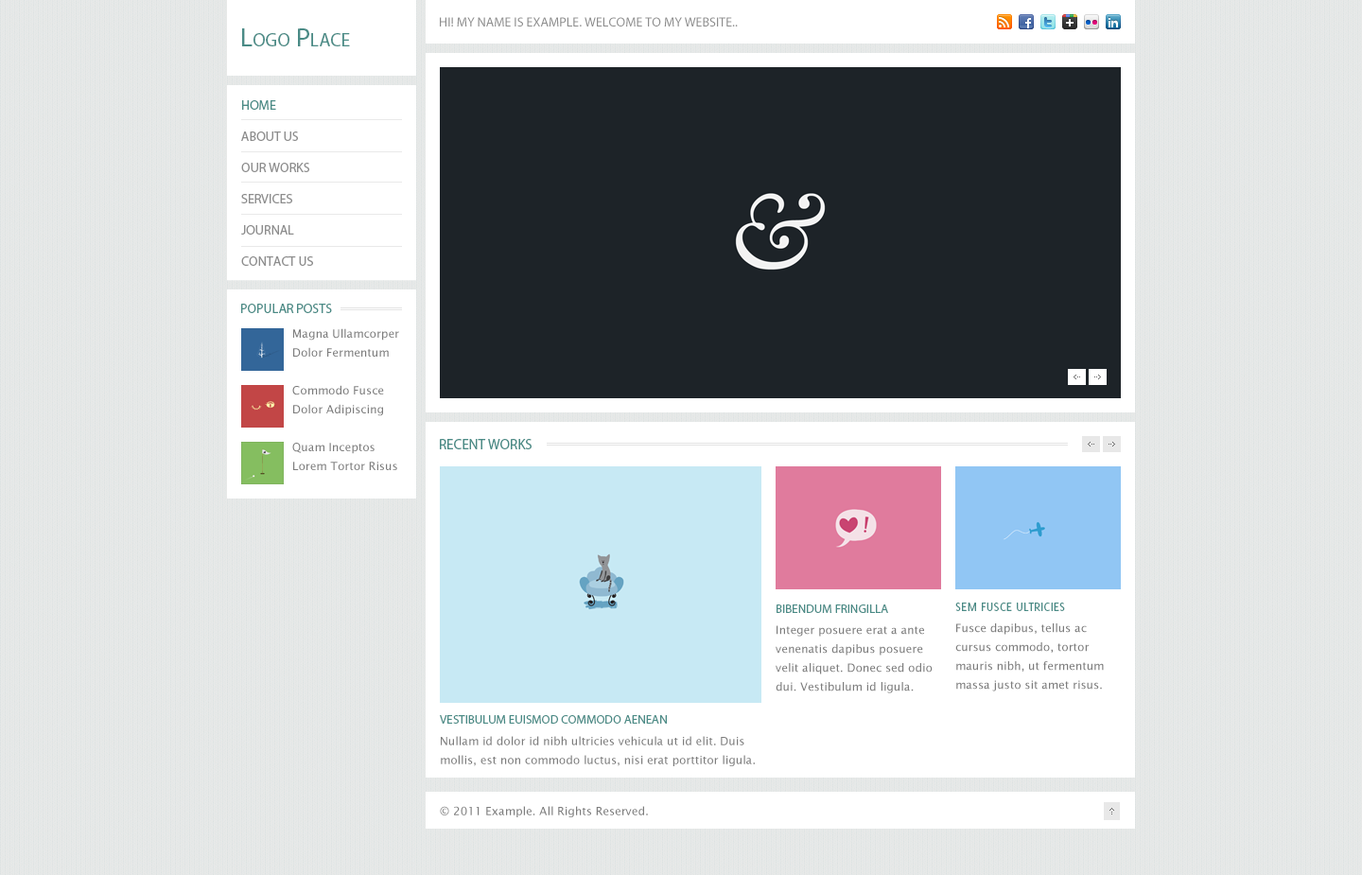
<style>
.page{position:relative;width:1362px;height:875px;background:#ffffff}
.page>*{position:absolute;margin:0}
.t1{font:13.2px "MyriadPro-Regular";color:#8d8d8d;text-transform:uppercase}
.t2{font:26.5px "MyriadPro-Regular";color:#4a8b86;font-variant:small-caps}
.t3{font:13.2px/31.2px "MyriadPro-Regular";color:#8d8d8d;text-transform:uppercase}
.t4{font:13.2px/31.2px "MyriadPro-Regular";color:#4a8b86;text-transform:uppercase}
.t5{font:13.2px "MyriadPro-Regular";color:#4a8b86;text-transform:uppercase}
.t6{font:11.4px/18.9px "LucidaSansUnicode";color:#7d7d7d}
.t7{font:14.2px "MyriadPro-Regular";color:#4a8b86;text-transform:uppercase}
.t8{font:12.3px "MyriadPro-Regular";color:#4a8b86;text-transform:uppercase}
.t9{font:13.2px "Delicious-Roman";color:#4a8b86;text-transform:uppercase}
.t10{font:11.4px "LucidaSansUnicode";color:#7d7d7d}
</style>
<div class="page">
<p class="t1" style="left:440px;top:17px;width:298px;height:9px">Hi! My Name Is Example. Welcome to my Website..</p>
<p class="t2" style="left:242px;top:28px;width:108px;height:18px">Logo Place</p>
<p class="t3" style="left:241px;top:100px;width:72px;height:166px"><span class="t4">Home<br></span>About Us<br>Our Works<br>Services<br>Journal<br>Contact Us</p>
<p class="t5" style="left:241px;top:304px;width:91px;height:9px">Popular Posts</p>
<p class="t6" style="left:293px;top:328px;width:106px;height:29px">Magna Ullamcorper<br>Dolor Fermentum</p>
<p class="t6" style="left:292px;top:385px;width:92px;height:31px">Commodo Fusce<br>Dolor Adipiscing</p>
<p class="t6" style="left:292px;top:443px;width:105px;height:27px">Quam Inceptos<br>Lorem Tortor Risus</p>
<p class="t7" style="left:440px;top:439px;width:92px;height:10px">Recent Works</p>
<p class="t8" style="left:777px;top:605px;width:111px;height:8px">Bibendum Fringilla</p>
<p class="t9" style="left:956px;top:603px;width:109px;height:8px">Sem Fusce Ultricies</p>
<p class="t6" style="left:776px;top:625px;width:157px;height:69px">Integer posuere erat a ante venenatis dapibus posuere velit aliquet. Donec sed odio dui. Vestibulum id ligula.</p>
<p class="t6" style="left:956px;top:624px;width:148px;height:68px">Fusce dapibus, tellus ac cursus commodo, tortor mauris nibh, ut fermentum massa justo sit amet risus. Aenean lacinia bibendum.</p>
<p class="t8" style="left:440px;top:715px;width:227px;height:9px">Vestibulum Euismod Commodo Aenean</p>
<p class="t6" style="left:441px;top:736px;width:314px;height:30px">Nullam id dolor id nibh ultricies vehicula ut id elit. Duis mollis, est non commodo luctus, nisi erat porttitor ligula.</p>
<p class="t10" style="left:440px;top:806px;width:208px;height:11px">© 2011 Example. All Rights Reserved.</p>
</div>
